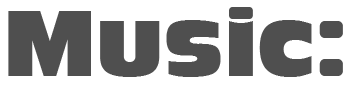
<style>
.page{position:relative;width:352px;height:86px;background:#ffffff}
.page>*{position:absolute;margin:0}
.t1{font:86.8px "AntiqueOliveCompact-Regular";color:#4f4f4f}
</style>
<div class="page">
<p class="t1" style="left:8px;top:7px;width:335px;height:70px">Music:</p>
</div>
